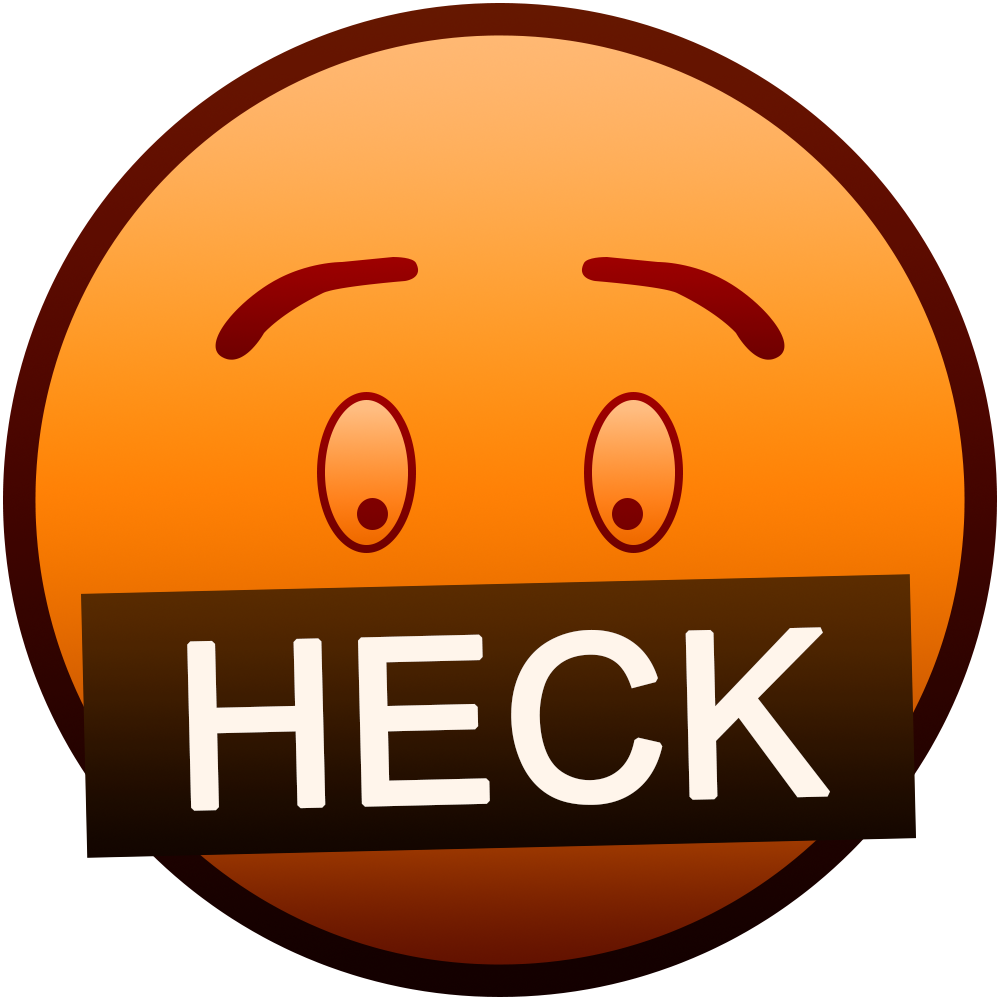
<style>
.page{position:relative;width:1000px;height:1000px;background:#ffffff}
.page>*{position:absolute;margin:0}
.t1{font:227.8px "ArialMT";color:#fff5eb;font-weight:bold}
</style>
<div class="page">
<p class="t1" style="left:187px;top:627px;width:643px;height:184px;rotate:-1deg">HECK</p>
</div>
